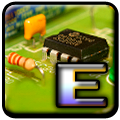
<style>
.page{position:relative;width:120px;height:120px}
.page>*{position:absolute;margin:0}
.t1{font:50.1px "Intellect";letter-spacing:-0.02em;font-weight:bold;scale:1.34 1}
</style>
<div class="page">
<p class="t1" style="left:57px;top:64px;width:49px;height:42px">E</p>
</div>
